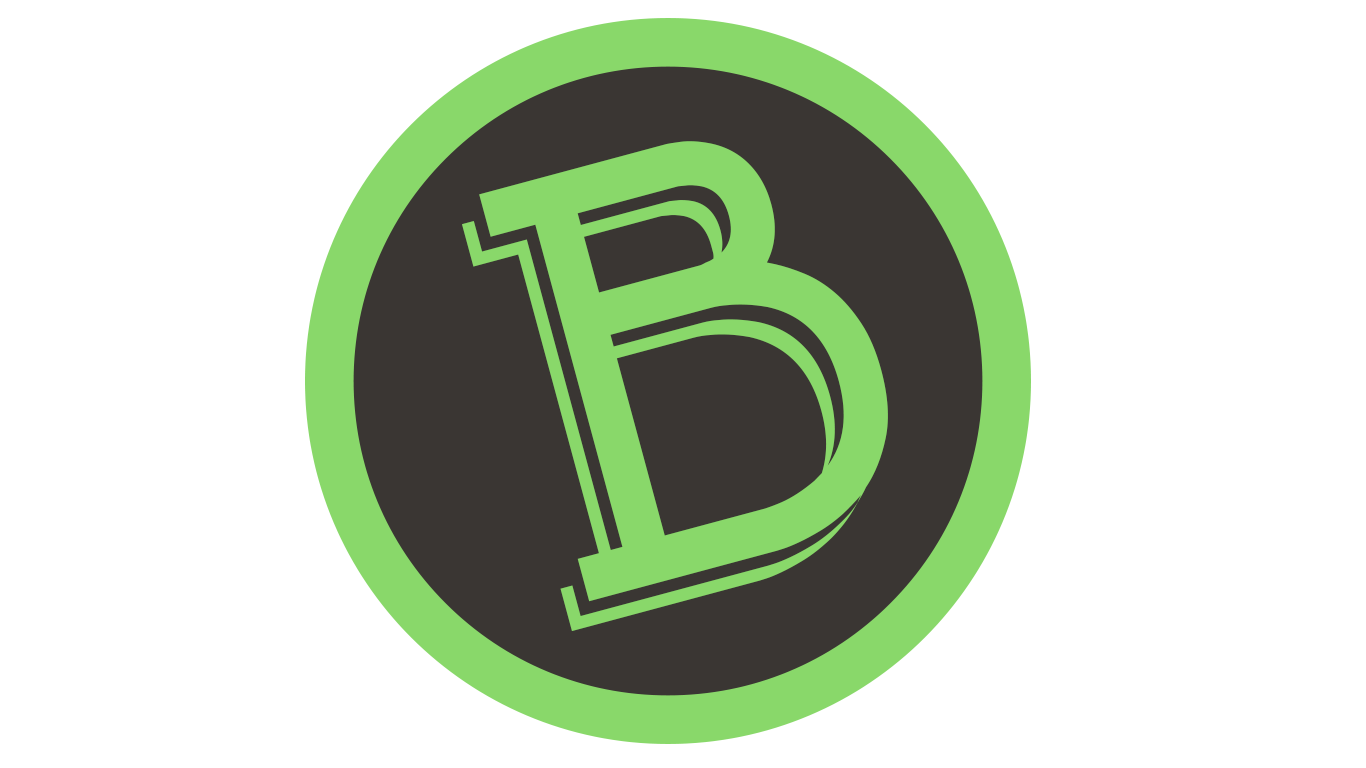
<style>
.page{position:relative;width:1366px;height:768px;background:#ffffff}
.page>*{position:absolute;margin:0}
.t1{font:608.1px "AltRenShadow";letter-spacing:0.025em;color:#89d86a}
</style>
<div class="page">
<p class="t1" style="left:462px;top:141px;width:426px;height:490px;rotate:-15deg">B</p>
</div>
